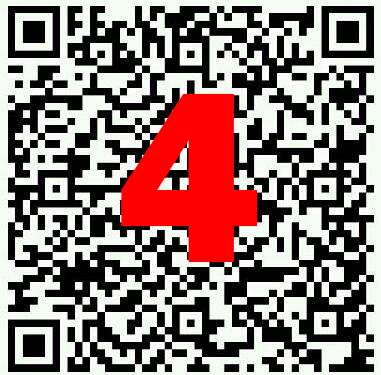
<style>
.page{position:relative;width:381px;height:375px}
.page>*{position:absolute;margin:0}
.t1{font:247.3px "FranklinGothic-Heavy";color:#ff0000}
</style>
<div class="page">
<p class="t1" style="left:121px;top:93px;width:137px;height:169px">4</p>
</div>
